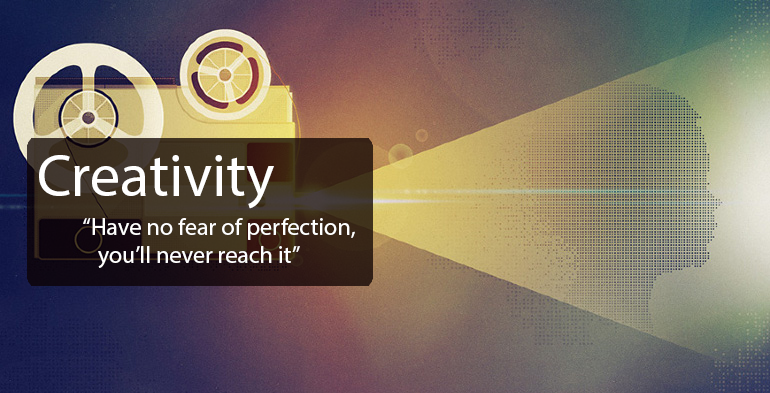
<style>
.page{position:relative;width:770px;height:393px}
.page>*{position:absolute;margin:0}
.t1{font:60px "MyriadPro-Regular";color:#ffffff}
.t2{font:24px "MyriadPro-Regular";color:#ffffff}
</style>
<div class="page">
<p class="t1" style="left:39px;top:155px;width:235px;height:54px">Creativity</p>
<p class="t2" style="left:83px;top:218px;width:272px;height:50px">“Have no fear of perfection, <br>   you’ll never reach it”</p>
</div>
